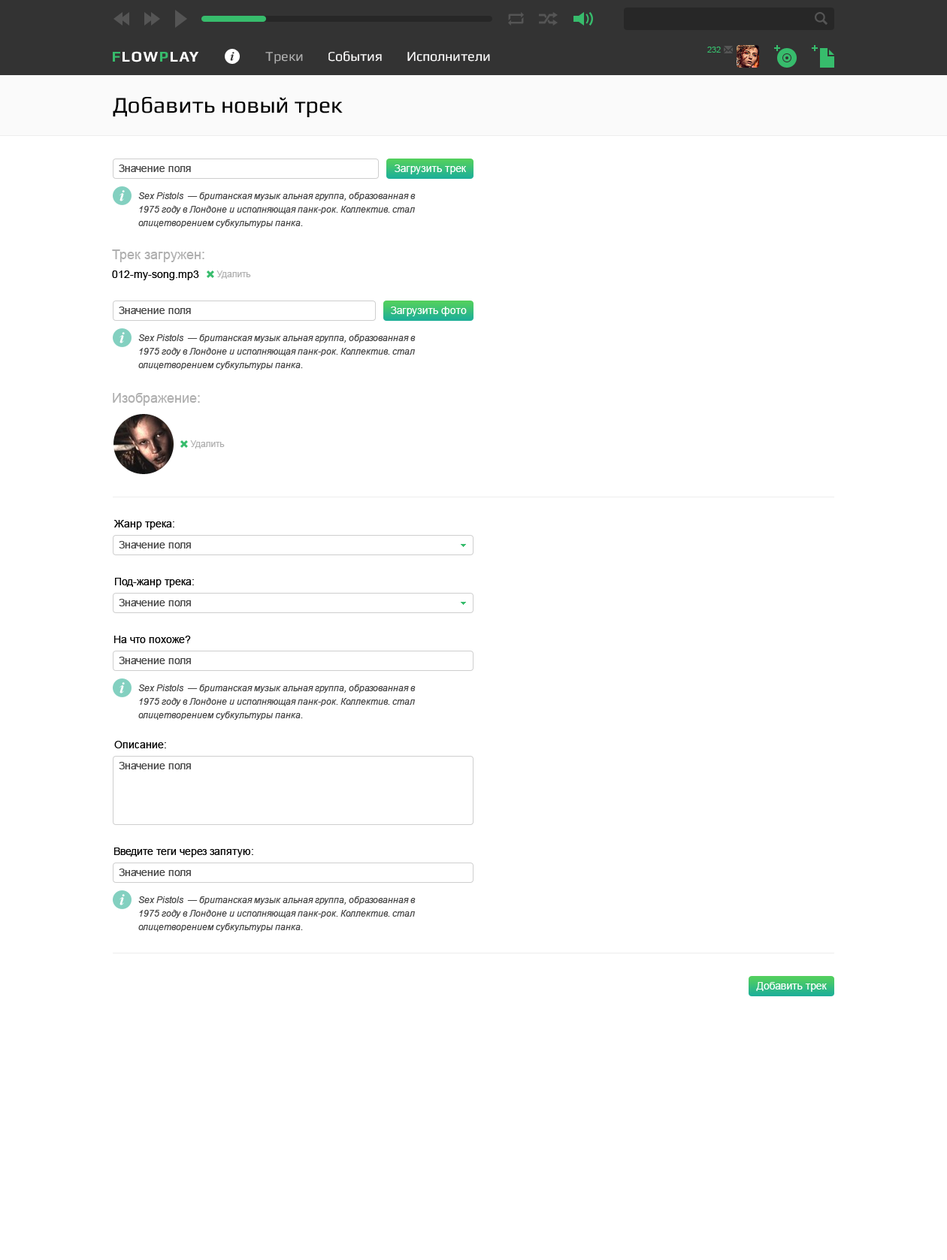
<style>
.page{position:relative;width:947px;height:1260px;background:#ffffff}
.page>*{position:absolute;margin:0}
.t1{font:22.5px "Play";color:#000000}
.t2{font:10.5px "ArialMT";color:#444444}
.t3{font:10.5px "ArialMT";color:#ffffff}
.t4{font:9px/13.5px "Arial-ItalicMT";color:#444444}
.t5{font:13.5px "ArialMT";color:#afafaf}
.t6{font:10.5px "ArialMT";color:#000000}
.t7{font:9px "ArialMT";color:#afafaf}
</style>
<div class="page">
<p class="t1" style="left:113px;top:97px;width:230px;height:20px">Добавить новый трек</p>
<p class="t2" style="left:119px;top:165px;width:72px;height:7px">Значение поля</p>
<p class="t3" style="left:394px;top:165px;width:72px;height:9px">Загрузить трек</p>
<p class="t4" style="left:138px;top:192px;width:277px;height:36px">Sex Pistols  — британская музык альная группа, образованная в 1975 году в Лондоне и исполняющая панк-рок. Коллектив. стал олицетворением субкультуры панка.</p>
<p class="t5" style="left:112px;top:249px;width:92px;height:13px">Трек загружен:</p>
<p class="t6" style="left:112px;top:270px;width:87px;height:10px">012-my-song.mp3</p>
<p class="t7" style="left:216px;top:270px;width:35px;height:9px">Удалить</p>
<p class="t2" style="left:119px;top:306px;width:72px;height:8px">Значение поля</p>
<p class="t3" style="left:391px;top:306px;width:76px;height:10px">Загрузить фото</p>
<p class="t4" style="left:138px;top:334px;width:277px;height:36px">Sex Pistols  — британская музык альная группа, образованная в 1975 году в Лондоне и исполняющая панк-рок. Коллектив. стал олицетворением субкультуры панка.</p>
<p class="t5" style="left:113px;top:393px;width:87px;height:13px">Изображение:</p>
<p class="t7" style="left:190px;top:440px;width:35px;height:8px">Удалить</p>
<p class="t6" style="left:114px;top:520px;width:60px;height:10px">Жанр трека:</p>
<p class="t2" style="left:119px;top:541px;width:72px;height:7px">Значение поля</p>
<p class="t6" style="left:115px;top:578px;width:79px;height:9px">Под-жанр трека:</p>
<p class="t2" style="left:119px;top:599px;width:72px;height:7px">Значение поля</p>
<p class="t6" style="left:114px;top:636px;width:77px;height:7px">На что похоже?</p>
<p class="t2" style="left:119px;top:657px;width:72px;height:7px">Значение поля</p>
<p class="t4" style="left:138px;top:684px;width:277px;height:36px">Sex Pistols  — британская музык альная группа, образованная в 1975 году в Лондоне и исполняющая панк-рок. Коллектив. стал олицетворением субкультуры панка.</p>
<p class="t6" style="left:114px;top:741px;width:52px;height:7px">Описание:</p>
<p class="t2" style="left:119px;top:762px;width:72px;height:7px">Значение поля</p>
<p class="t6" style="left:114px;top:847px;width:139px;height:10px">Введите теги через запятую:</p>
<p class="t2" style="left:119px;top:868px;width:72px;height:8px">Значение поля</p>
<p class="t4" style="left:138px;top:896px;width:277px;height:36px">Sex Pistols  — британская музык альная группа, образованная в 1975 году в Лондоне и исполняющая панк-рок. Коллектив. стал олицетворением субкультуры панка.</p>
<p class="t3" style="left:756px;top:982px;width:70px;height:10px">Добавить трек</p>
</div>
